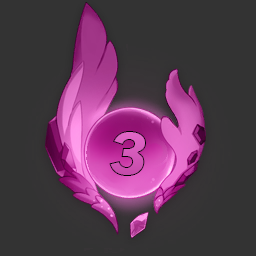
<style>
.page{position:relative;width:256px;height:256px;background:#333333}
.page>*{position:absolute;margin:0}
.t1{font:64.8px "FranklinGothic-HeavyItalic";letter-spacing:0.002em;color:#ce54b3}
</style>
<div class="page">
<p class="t1" style="left:109px;top:131px;width:37px;height:45px">3</p>
</div>
